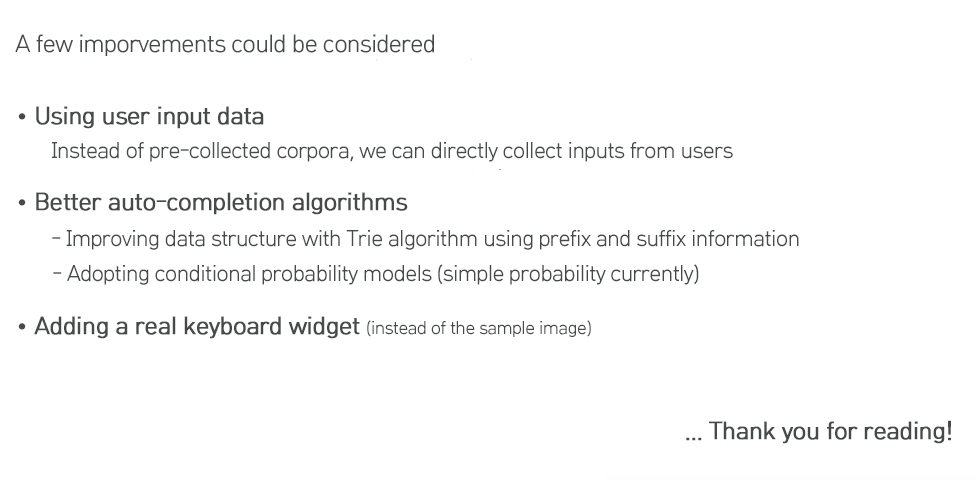
<style>
.page{position:relative;width:976px;height:480px;background:#ffffff}
.page>*{position:absolute;margin:0}
.t1{font:24px "HCRDotum";letter-spacing:-0.05em;color:#474a4a}
.t2{font:24px "HCRDotum";letter-spacing:-0.05em;color:#474a4a;font-weight:bold}
.t3{font:22px "HCRDotum";letter-spacing:-0.05em;color:#474a4a}
.t4{font:18px "HCRDotum";letter-spacing:-0.05em;color:#474a4a}
</style>
<div class="page">
<p class="t1" style="left:15px;top:34px;width:419px;height:22px">A few imporvements could be considered</p>
<p class="t2" style="left:18px;top:106px;width:246px;height:23px"><span class="t1">• </span>Using user input data</p>
<p class="t3" style="left:52px;top:142px;width:681px;height:20px">Instead of pre-collected corpora, we can directly collect inputs from users</p>
<p class="t2" style="left:18px;top:192px;width:390px;height:23px"><span class="t1">• </span>Better auto-completion algorithms</p>
<p class="t3" style="left:52px;top:230px;width:747px;height:20px">- Improving data structure with Trie algorithm using prefix and suffix information</p>
<p class="t3" style="left:53px;top:264px;width:646px;height:21px">- Adopting conditional probability models (simple probability currently)</p>
<p class="t2" style="left:18px;top:316px;width:573px;height:23px"><span class="t1">• </span>Adding a real keyboard widget <span class="t4">(instead of the sample image)</span></p>
<p class="t2" style="left:686px;top:420px;width:265px;height:24px">... Thank you for reading!</p>
</div>
